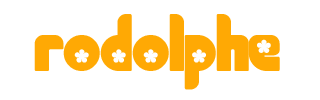
<style>
.page{position:relative;width:320px;height:100px;background:#ffffff}
.page>*{position:absolute;margin:0}
.t1{font:72px "Chick";color:#ffa904}
</style>
<div class="page">
<p class="t1" style="left:34px;top:14px;width:246px;height:76px">rodolphe</p>
</div>
